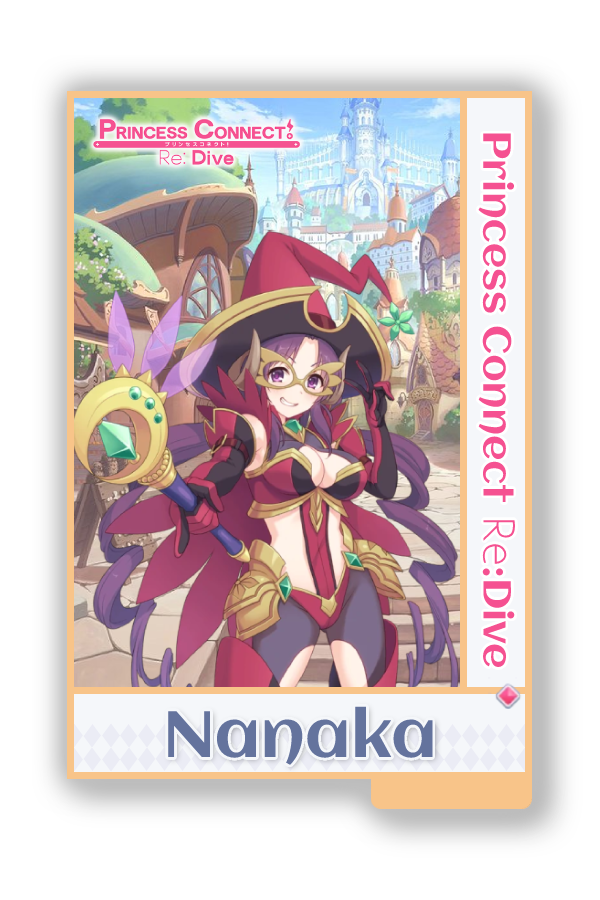
<style>
.page{position:relative;width:600px;height:900px;background:#ffffff}
.page>*{position:absolute;margin:0}
.t1{font:39px "Aclonica-Regular";color:#f55191}
.t2{font:39px "AaarghNormal";color:#f55191}
.t3{font:65px "Aclonica-Regular";color:#64739d}
</style>
<div class="page">
<p class="t1" style="left:478px;top:133px;width:38px;height:534px;rotate:90deg">Princess Connect <span class="t2">Re</span>:Dive</p>
<p class="t3" style="left:168px;top:706px;width:265px;height:59px">Nanaka</p>
</div>
